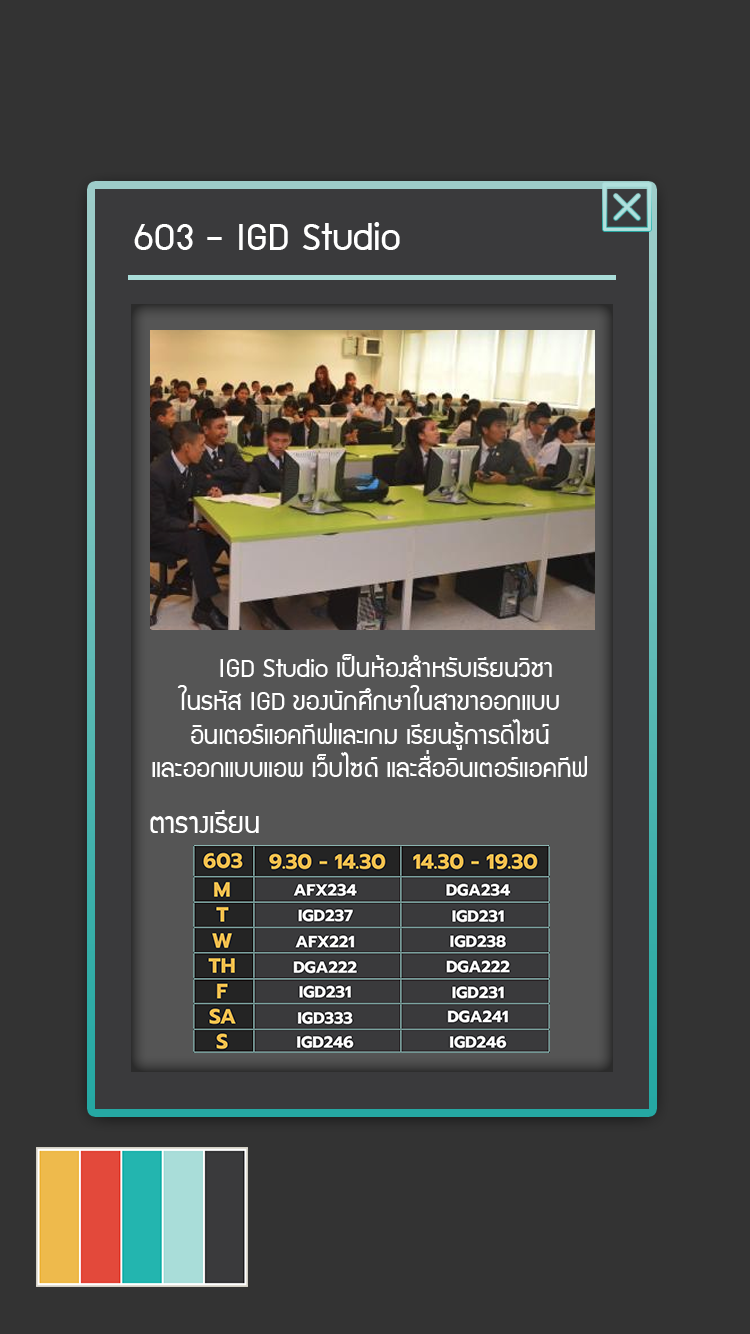
<style>
.page{position:relative;width:750px;height:1334px;background:#333333}
.page>*{position:absolute;margin:0}
.t1{font:43.2px "supermarket";color:#ffffff}
.t2{font:28.8px/33.5px "supermarket";color:#ffffff}
.t3{font:32px "supermarket";color:#ffffff}
</style>
<div class="page">
<p class="t1" style="left:134px;top:222px;width:266px;height:28px">603 - IGD Studio</p>
<p class="t2" style="left:152px;top:654px;width:435px;height:123px;text-align:center">IGD Studio เป็นห้องสำหรับเรียนวิชา<br>ในรหัส IGD ของนักศึกษาในสาขาออกแบบ<br>อินเตอร์แอคทีฟและเกม เรียนรู้การดีไซน์<br>และออกแบบแอพ เว็บไซด์ และสื่ออินเตอร์แอคทีฟ</p>
<p class="t3" style="left:150px;top:810px;width:109px;height:23px">ตารางเรียน</p>
</div>
